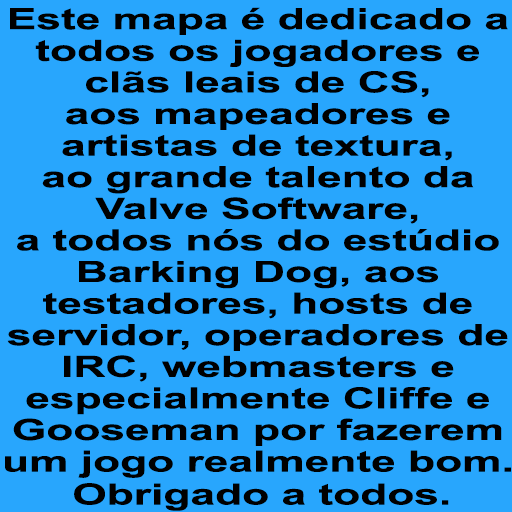
<style>
.page{position:relative;width:512px;height:512px;background:#28a6fd}
.page>*{position:absolute;margin:0}
.t1{font:29.3px/31.6px "Arial-BoldMT";color:#000000;scale:1.51 1}
.t2{font:29.3px "Arial-BoldMT";color:#000000;scale:1.51 1}
</style>
<div class="page">
<p class="t1" style="left:5px;top:7px;width:506px;height:471px;text-align:center">Este mapa é dedicado a<br>todos os jogadores e<br>clãs leais de CS,<br>aos mapeadores e<br>artistas de textura,<br>ao grande talento da<br>Valve Software,<br>a todos nós do estúdio<br>Barking Dog, aos<br>testadores, hosts de<br>servidor, operadores de<br>IRC, webmasters e<br>especialmente Cliffe e<br>Gooseman por fazerem<br>um jogo realmente bom.</p>
<p class="t2" style="left:74px;top:483px;width:375px;height:28px">Obrigado a todos.</p>
</div>
